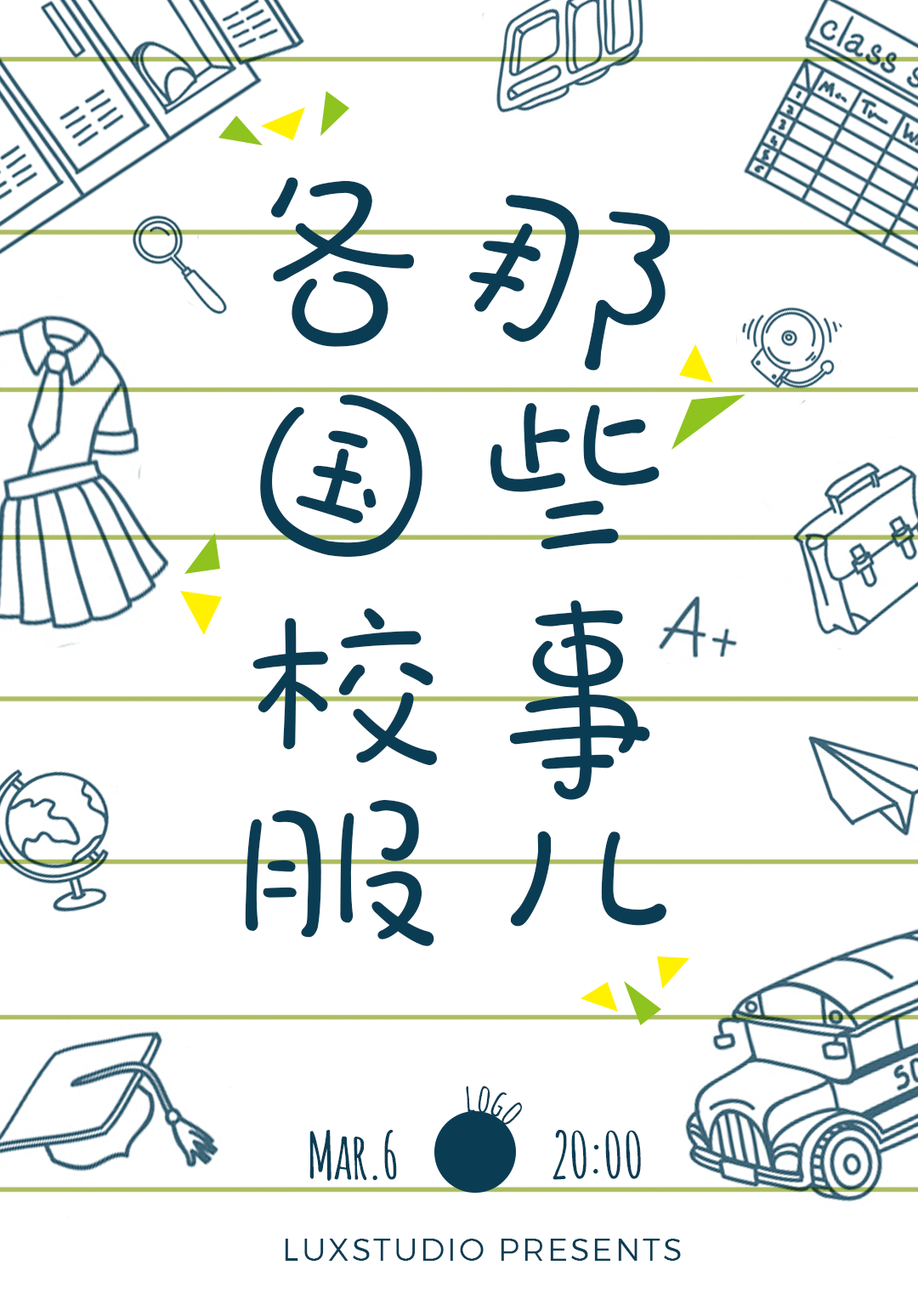
<style>
.page{position:relative;width:918px;height:1299px;background:#ffffff}
.page>*{position:absolute;margin:0}
.t1{font:218.7px "DFPao-W4-WIN-BF";color:#0a3d54}
.t2{font:38.9px "Amatic-Bold";color:#0a3d54}
.t3{font:63.8px "Amatic-Bold";color:#0a3d54}
.t4{font:31.5px "Montserrat-Light";letter-spacing:0.08em;color:#0a3d54}
</style>
<div class="page">
<p class="t1" style="left:270px;top:177px;width:144px;height:170px;rotate:-3deg">各</p>
<p class="t1" style="left:469px;top:195px;width:202px;height:176px;rotate:13deg">那</p>
<p class="t1" style="left:260px;top:394px;width:162px;height:163px;rotate:14deg">国</p>
<p class="t1" style="left:490px;top:403px;width:170px;height:147px;rotate:-5deg">些</p>
<p class="t1" style="left:509px;top:600px;width:141px;height:200px">事</p>
<p class="t1" style="left:252px;top:608px;width:185px;height:158px">校</p>
<p class="t1" style="left:245px;top:799px;width:189px;height:147px">服</p>
<p class="t1" style="left:510px;top:830px;width:157px;height:97px">儿</p>
<p class="t2" style="left:466px;top:1086px;width:56px;height:39px">logo</p>
<p class="t3" style="left:309px;top:1130px;width:332px;height:51px">Mar.6                     20:00</p>
<p class="t4" style="left:285px;top:1239px;width:396px;height:22px">LUXSTUDIO PRESENTS</p>
</div>
